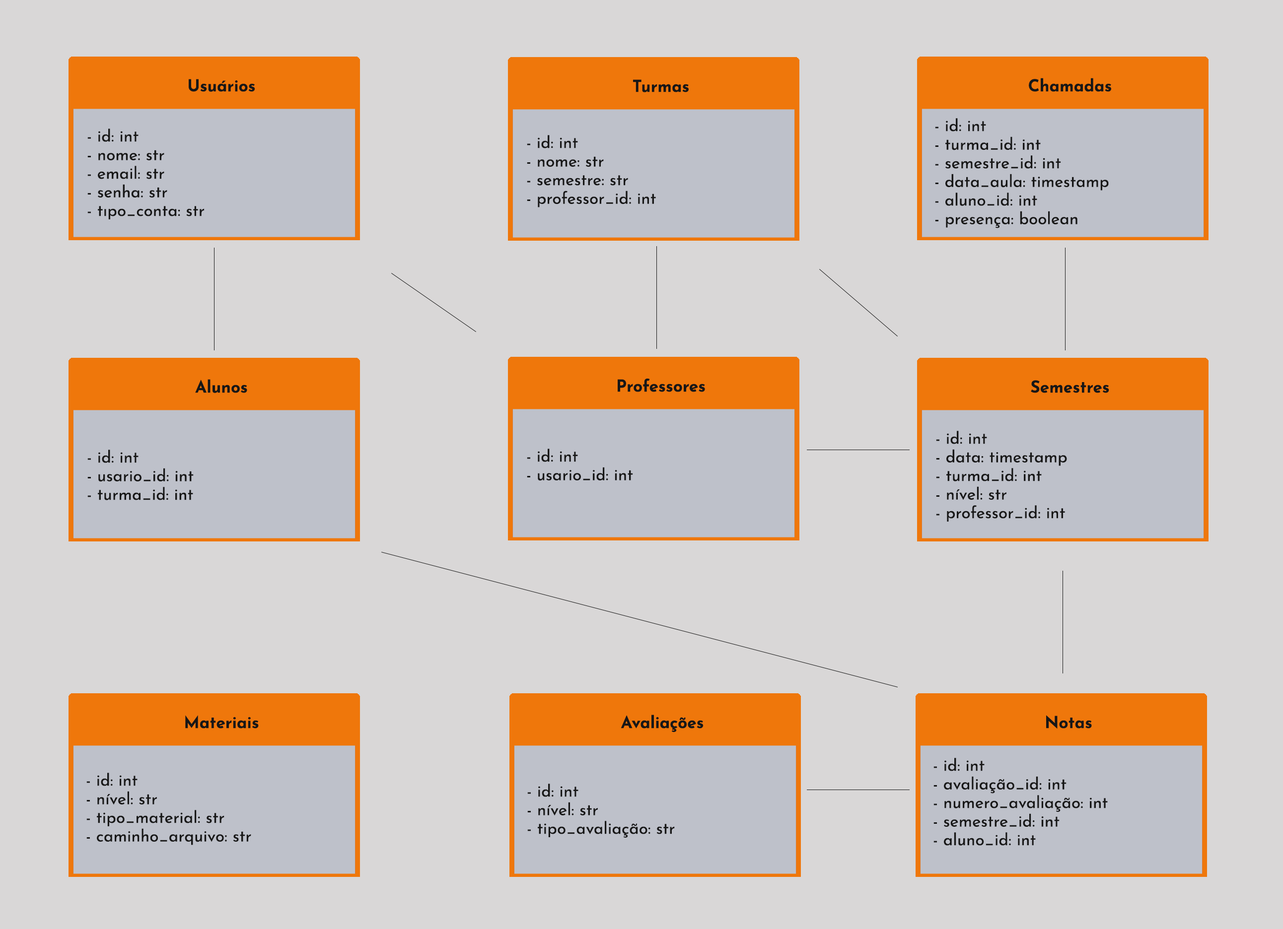
<style>
.page{position:relative;width:1283px;height:929px;background:#d9d7d7}
.page>*{position:absolute;margin:0}
.t1{font:16.5px "JosefinSans-Bold";color:#171717}
.t2{font:16.5px/18.6px "JosefinSans-Regular";color:#171717}
</style>
<div class="page">
<p class="t1" style="left:1029px;top:78px;width:82px;height:14px">Chamadas</p>
<p class="t1" style="left:189px;top:79px;width:66px;height:13px">Usuários</p>
<p class="t1" style="left:633px;top:79px;width:56px;height:13px">Turmas</p>
<p class="t2" style="left:935px;top:118px;width:174px;height:110px">- id: int<br>- turma_id: int<br>- semestre_id: int<br>- data_aula: timestamp<br>- aluno_id: int<br>- presença: boolean</p>
<p class="t2" style="left:87px;top:129px;width:118px;height:90px">- id: int<br>- nome: str<br>- email: str<br>- senha: str<br>- tipo_conta: str</p>
<p class="t2" style="left:527px;top:135px;width:129px;height:73px">- id: int<br>- nome: str<br>- semestre: str<br>- professor_id: int</p>
<p class="t1" style="left:195px;top:379px;width:52px;height:14px">Alunos</p>
<p class="t1" style="left:618px;top:378px;width:87px;height:14px">Professores</p>
<p class="t1" style="left:1031px;top:380px;width:78px;height:13px">Semestres</p>
<p class="t2" style="left:936px;top:431px;width:131px;height:91px">- id: int<br>- data: timestamp<br>- turma_id: int<br>- nível: str<br>- professor_id: int</p>
<p class="t2" style="left:87px;top:450px;width:107px;height:50px">- id: int<br>- usario_id: int<br>- turma_id: int</p>
<p class="t2" style="left:527px;top:449px;width:106px;height:32px">- id: int<br>- usario_id: int</p>
<p class="t1" style="left:185px;top:715px;width:74px;height:14px">Materiais</p>
<p class="t1" style="left:621px;top:715px;width:83px;height:17px">Avaliações</p>
<p class="t1" style="left:1046px;top:715px;width:46px;height:14px">Notas</p>
<p class="t2" style="left:933px;top:758px;width:175px;height:88px">- id: int<br>- avaliação_id: int<br>- numero_avaliação: int<br>- semestre_id: int<br>- aluno_id: int</p>
<p class="t2" style="left:86px;top:773px;width:165px;height:73px">- id: int<br>- nível: str<br>- tipo_material: str<br>- caminho_arquivo: str</p>
<p class="t2" style="left:527px;top:784px;width:148px;height:54px">- id: int<br>- nível: str<br>- tipo_avaliação: str</p>
</div>
